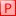
<style>
.page{position:relative;width:16px;height:16px;background:#ffabab}
.page>*{position:absolute;margin:0}
.t1{font:14px "MyriadPro-Regular";color:#ff0000}
</style>
<div class="page">
<p class="t1" style="left:5px;top:3px;width:7px;height:10px">P</p>
</div>
